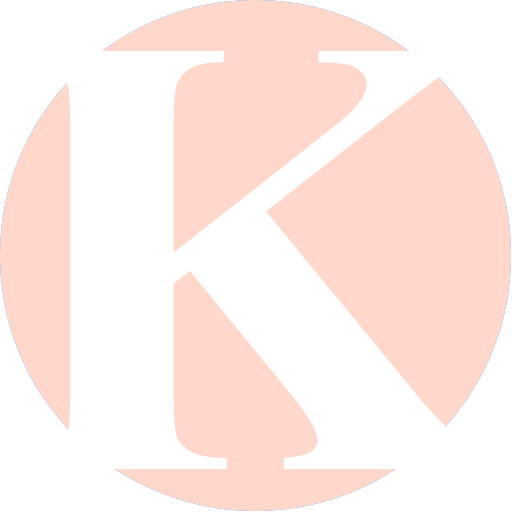
<style>
.page{position:relative;width:512px;height:512px;background:#ffffff}
.page>*{position:absolute;margin:0}
.t1{font:630.5px "TimesNewRomanPS-BoldMT";color:#ffffff;scale:1.03 1}
</style>
<div class="page">
<p class="t1" style="left:9px;top:51px;width:499px;height:418px">K</p>
</div>
